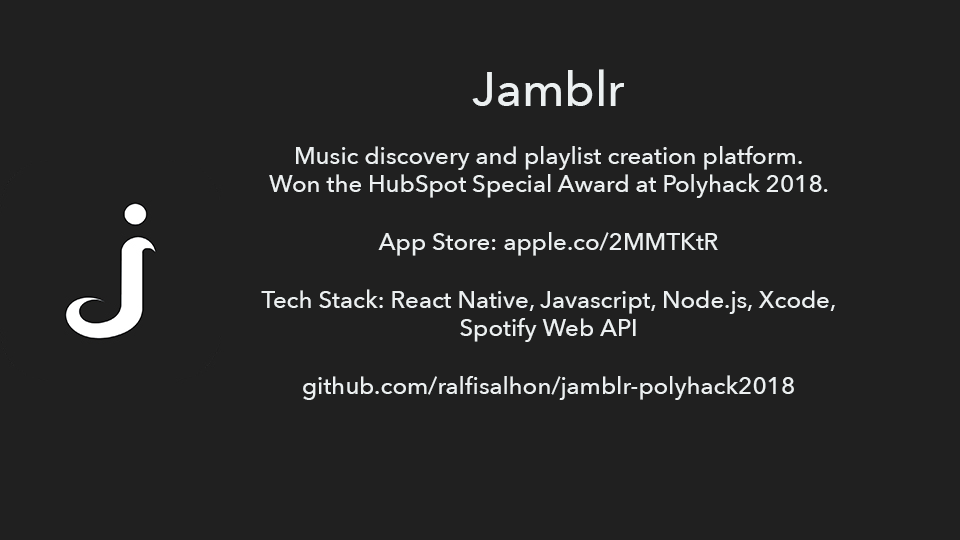
<style>
.page{position:relative;width:960px;height:540px;background:#202020}
.page>*{position:absolute;margin:0}
.t1{font:24px "AvenirNext-Medium";color:#ecf0f1}
.t2{font:48px "AvenirNext-Medium";color:#ecf0f1}
</style>
<div class="page">
<p class="t1" style="left:261px;top:69px;width:574px;height:331px;text-align:center"><span class="t2">Jamblr<br></span><br>Music discovery and playlist creation platform.<br>Won the HubSpot Special Award at Polyhack 2018.<br><br>App Store: apple.co/2MMTKtR<br><br>Tech Stack: React Native, Javascript, Node.js, Xcode, Spotify Web API<br> <br>github.com/ralfisalhon/jamblr-polyhack2018</p>
</div>
